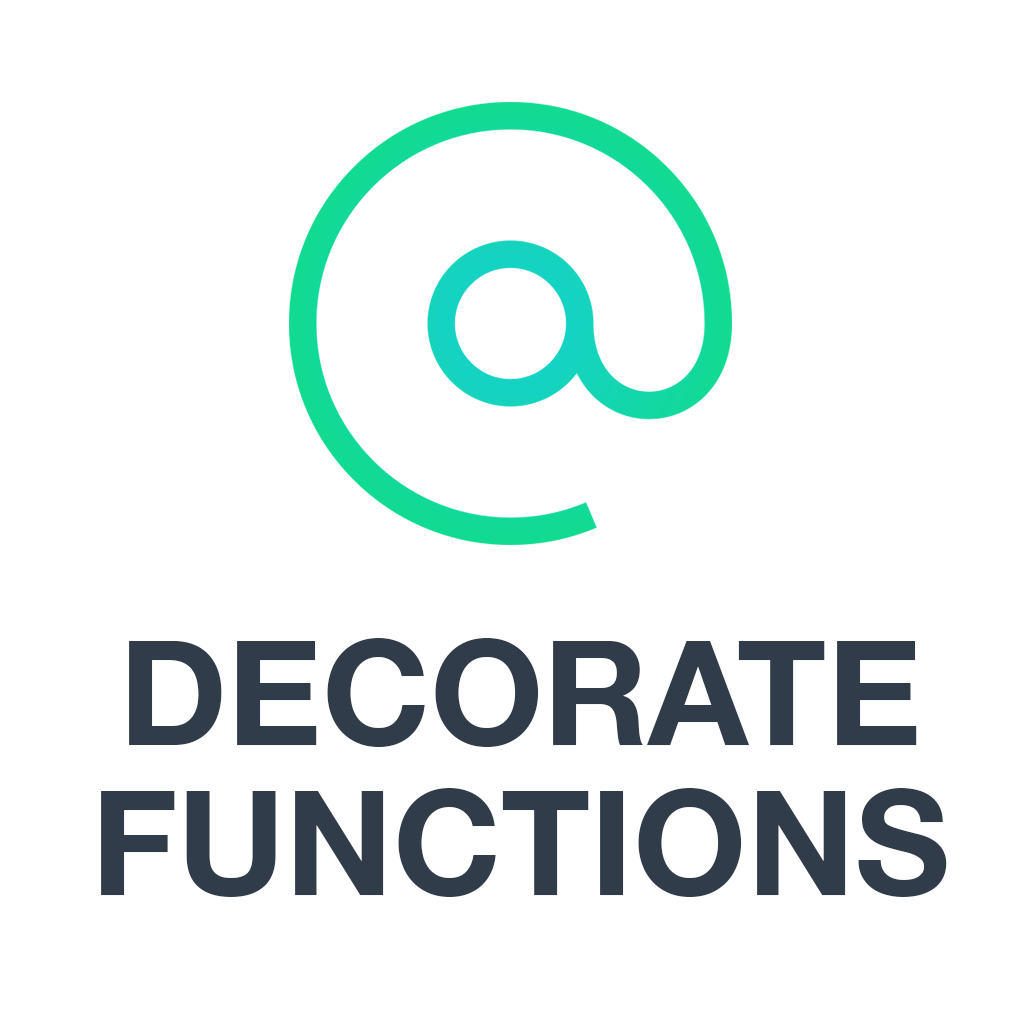
<style>
.page{position:relative;width:1024px;height:1024px;background:#ffffff}
.page>*{position:absolute;margin:0}
.t1{font:145.8px/150px "HelveticaNeueLTCom-Bd";color:#303c49}
.t2{font:145.8px "HelveticaNeueLTCom-Bd";color:#303c49}
</style>
<div class="page">
<p class="t1" style="left:101px;top:638px;width:846px;height:259px;text-align:center"><span class="t2">DECORATE<br></span>FUNCTIONS</p>
</div>
